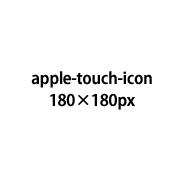
<style>
.page{position:relative;width:180px;height:180px;background:#ffffff}
.page>*{position:absolute;margin:0}
.t1{font:16px/22px "KozGoPr6N-Bold";letter-spacing:-0.02em;color:#000000}
</style>
<div class="page">
<p class="t1" style="left:31px;top:71px;width:121px;height:39px;text-align:center">apple-touch-icon<br>180×180px</p>
</div>
